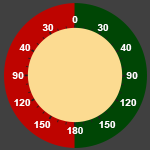
<style>
.page{position:relative;width:150px;height:150px;background:#fcdb91}
.page>*{position:absolute;margin:0}
.t1{font:10px "Arial-BoldMT";color:#ffffff}
</style>
<div class="page">
<p class="t1" style="left:72px;top:16px;width:6px;height:7px">0</p>
<p class="t1" style="left:42px;top:24px;width:12px;height:7px">30</p>
<p class="t1" style="left:97px;top:24px;width:12px;height:7px">30</p>
<p class="t1" style="left:19px;top:44px;width:12px;height:7px">40</p>
<p class="t1" style="left:120px;top:44px;width:12px;height:7px">40</p>
<p class="t1" style="left:12px;top:72px;width:12px;height:7px">90</p>
<p class="t1" style="left:126px;top:72px;width:12px;height:7px">90</p>
<p class="t1" style="left:14px;top:99px;width:17px;height:7px">120</p>
<p class="t1" style="left:120px;top:99px;width:17px;height:7px">120</p>
<p class="t1" style="left:34px;top:121px;width:17px;height:7px">150</p>
<p class="t1" style="left:99px;top:121px;width:17px;height:7px">150</p>
<p class="t1" style="left:67px;top:127px;width:16px;height:7px">180</p>
</div>
